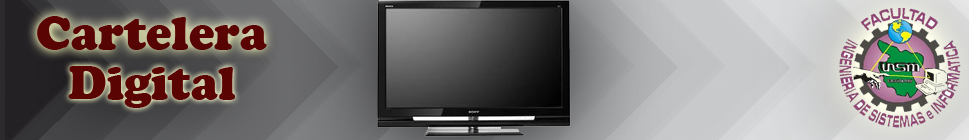
<style>
.page{position:relative;width:969px;height:140px}
.page>*{position:absolute;margin:0}
.t1{font:48px "CooperBlack";color:#5b0404}
</style>
<div class="page">
<p class="t1" style="left:37px;top:16px;width:230px;height:34px">Cartelera</p>
<p class="t1" style="left:68px;top:66px;width:167px;height:42px">Digital</p>
</div>
